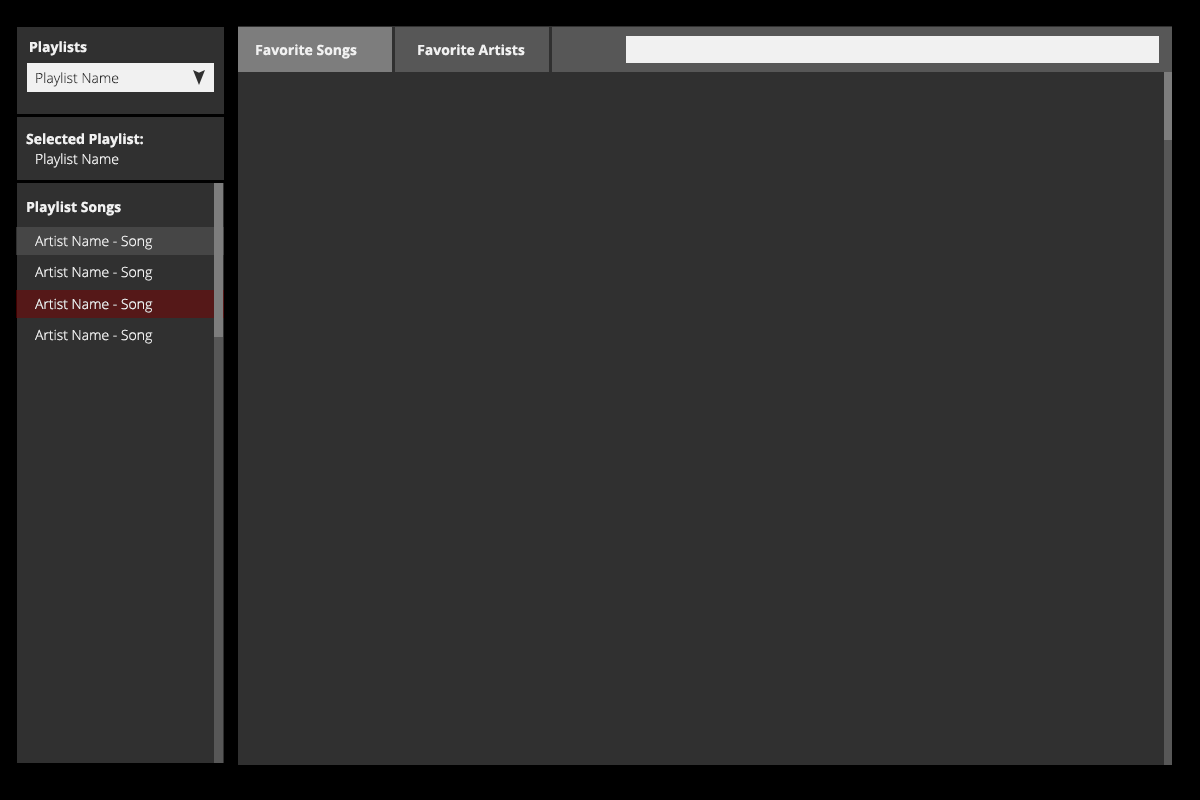
<style>
.page{position:relative;width:1200px;height:800px;background:#303030}
.page>*{position:absolute;margin:0}
.t1{font:14px "OpenSans-Bold";color:#f1f1f1}
.t2{font:14px "OpenSans-Light";color:#303030}
.t3{font:14px "OpenSans-Light";color:#f1f1f1}
</style>
<div class="page">
<p class="t1" style="left:30px;top:41px;width:57px;height:15px">Playlists</p>
<p class="t1" style="left:256px;top:44px;width:101px;height:15px">Favorite Songs</p>
<p class="t1" style="left:418px;top:44px;width:107px;height:12px">Favorite Artists</p>
<p class="t2" style="left:36px;top:72px;width:83px;height:15px">Playlist Name</p>
<p class="t1" style="left:26px;top:133px;width:117px;height:15px">Selected Playlist:</p>
<p class="t3" style="left:36px;top:153px;width:83px;height:15px">Playlist Name</p>
<p class="t1" style="left:27px;top:201px;width:94px;height:15px">Playlist Songs</p>
<p class="t3" style="left:35px;top:235px;width:118px;height:15px">Artist Name - Song</p>
<p class="t3" style="left:35px;top:266px;width:118px;height:15px">Artist Name - Song</p>
<p class="t3" style="left:35px;top:298px;width:118px;height:15px">Artist Name - Song</p>
<p class="t3" style="left:35px;top:329px;width:118px;height:15px">Artist Name - Song</p>
</div>
